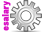
<style>
.page{position:relative;width:43px;height:32px;background:#ffffff}
.page>*{position:absolute;margin:0}
.t1{font:8.9px "Arial-Black";letter-spacing:-0.005em;color:#d913c4;font-weight:bold;scale:0.79 1}
</style>
<div class="page">
<p class="t1" style="left:2px;top:1px;width:9px;height:30px;rotate:-90deg">esalary</p>
</div>
